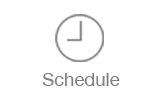
<style>
.page{position:relative;width:160px;height:98px;background:#ffffff}
.page>*{position:absolute;margin:0}
.t1{font:18.5px "HelveticaNeue";color:#807f7f}
</style>
<div class="page">
<p class="t1" style="left:42px;top:73px;width:78px;height:13px">Schedule</p>
</div>
